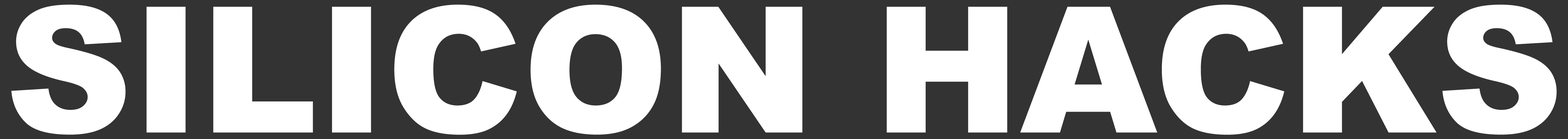
<style>
.page{position:relative;width:1568px;height:139px;background:#ffffff}
.page>*{position:absolute;margin:0}
.t1{font:175.6px "Arial-Black";color:#ffffff}
</style>
<div class="page">
<p class="t1" style="left:11px;top:5px;width:1546px;height:130px">SILICON HACKS</p>
</div>
